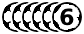
<style>
.page{position:relative;width:84px;height:34px;background:#ffffff}
.page>*{position:absolute;margin:0}
.t1{font:22.4px "DejaVuSans-Bold";color:#000000}
</style>
<div class="page">
<p class="t1" style="left:60px;top:8px;width:14px;height:18px">6</p>
</div>
